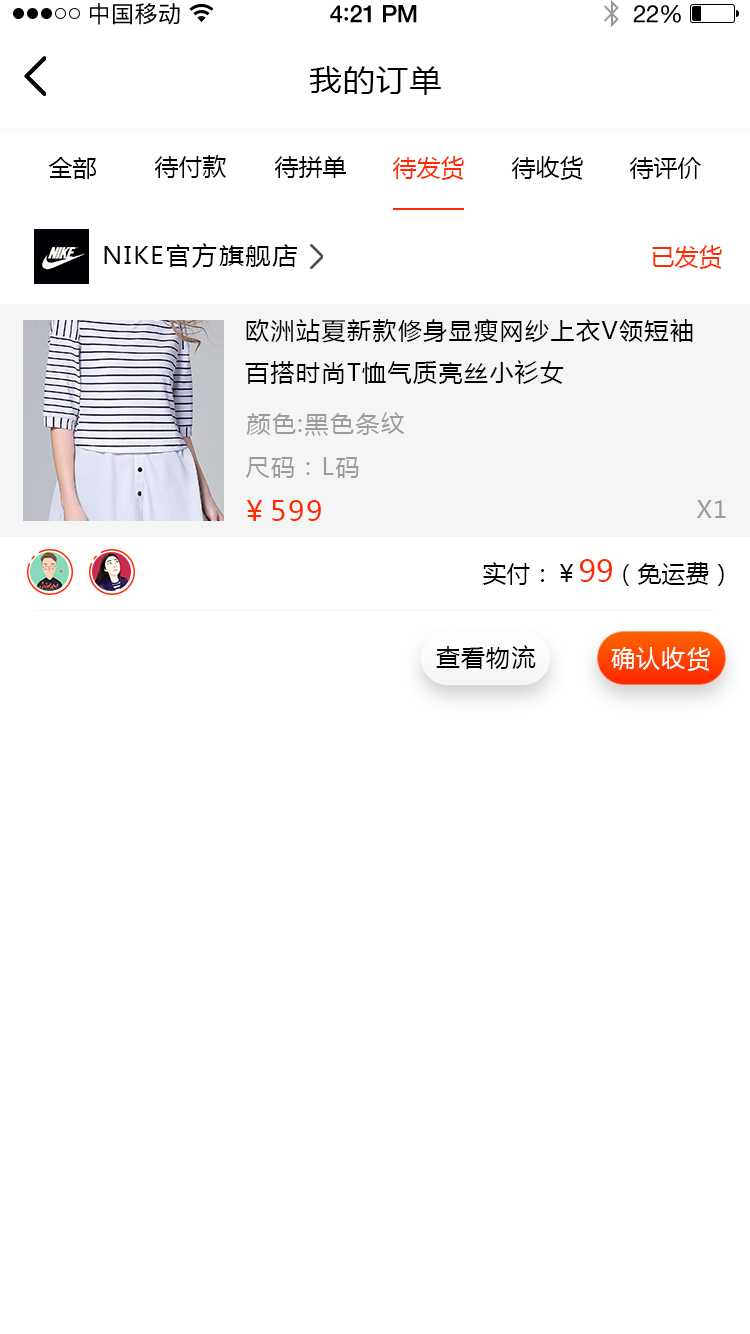
<style>
.page{position:relative;width:750px;height:1334px;background:#ffffff}
.page>*{position:absolute;margin:0}
.t1{font:23px "PingFangSC-Regular";letter-spacing:0.02em;color:#000000}
.t2{font:24px "HelveticaNeue-Medium";letter-spacing:-0.02em;color:#000000}
.t3{font:26px "Avenir-Medium";letter-spacing:-0.02em;color:#000000}
.t4{font:24px "HelveticaNeue";letter-spacing:-0.02em;color:#000000}
.t5{font:30px "MicrosoftYaHei";letter-spacing:0.05em;color:#000000;scale:1.06 1}
.t6{font:24px "MicrosoftYaHei";color:#000000;text-transform:uppercase}
.t7{font:24px "MicrosoftYaHei";color:#ff2a00;text-transform:uppercase}
.t8{font:24px "MicrosoftYaHei";letter-spacing:0.05em;color:#000000;scale:1.06 1}
.t9{font:24px "MicrosoftYaHei";letter-spacing:0.06em;color:#000000;text-transform:uppercase}
.t10{font:24px "MicrosoftYaHei";letter-spacing:0.06em;color:#9b9b9b;text-transform:uppercase}
.t11{font:28px "MicrosoftYaHei";letter-spacing:0.06em;color:#ff2a00;text-transform:uppercase}
.t12{font:30px "MicrosoftYaHei";color:#ff2a00;text-transform:uppercase}
.t13{font:24px "MicrosoftYaHei";letter-spacing:0.05em;color:#000000;text-transform:uppercase}
.t14{font:24px "MicrosoftYaHei";letter-spacing:0.05em;color:#ffffff;text-transform:uppercase}
</style>
<div class="page">
<p class="t1" style="left:90px;top:3px;width:90px;height:22px">中国移动</p>
<p class="t2" style="left:330px;top:5px;width:87px;height:18px">4<span class="t3">:</span>21 PM</p>
<p class="t4" style="left:633px;top:5px;width:48px;height:18px">22%</p>
<p class="t5" style="left:309px;top:66px;width:132px;height:29px">我的订单</p>
<p class="t6" style="left:48px;top:157px;width:48px;height:22px">全部</p>
<p class="t6" style="left:154px;top:155px;width:72px;height:23px">待付款</p>
<p class="t6" style="left:274px;top:156px;width:72px;height:22px">待拼单</p>
<p class="t7" style="left:392px;top:156px;width:72px;height:24px">待发货</p>
<p class="t6" style="left:511px;top:156px;width:72px;height:24px">待收货</p>
<p class="t6" style="left:629px;top:157px;width:73px;height:22px">待评价</p>
<p class="t8" style="left:104px;top:243px;width:193px;height:25px">NIKE官方旗舰店</p>
<p class="t7" style="left:652px;top:245px;width:70px;height:24px">已发货</p>
<p class="t9" style="left:245px;top:319px;width:448px;height:65px">欧洲站夏新款修身显瘦网纱上衣v领短袖百搭时尚t恤气质亮丝小衫女</p>
<p class="t10" style="left:246px;top:412px;width:159px;height:24px">颜色:黑色条纹</p>
<p class="t10" style="left:245px;top:457px;width:114px;height:21px">尺码：L码</p>
<p class="t11" style="left:246px;top:500px;width:75px;height:21px">￥599</p>
<p class="t10" style="left:696px;top:500px;width:30px;height:18px">x1</p>
<p class="t6" style="left:483px;top:559px;width:241px;height:27px">实付：￥<span class="t12">99</span>（免运费）</p>
<p class="t13" style="left:436px;top:645px;width:100px;height:24px">查看物流</p>
<p class="t14" style="left:611px;top:647px;width:99px;height:24px">确认收货</p>
</div>
